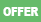
<style>
.page{position:relative;width:41px;height:22px;background:#66bb6a}
.page>*{position:absolute;margin:0}
.t1{font:12px "Arial-Black";color:#ffffff;scale:0.79 1}
</style>
<div class="page">
<p class="t1" style="left:3px;top:7px;width:36px;height:9px">OFFER</p>
</div>
